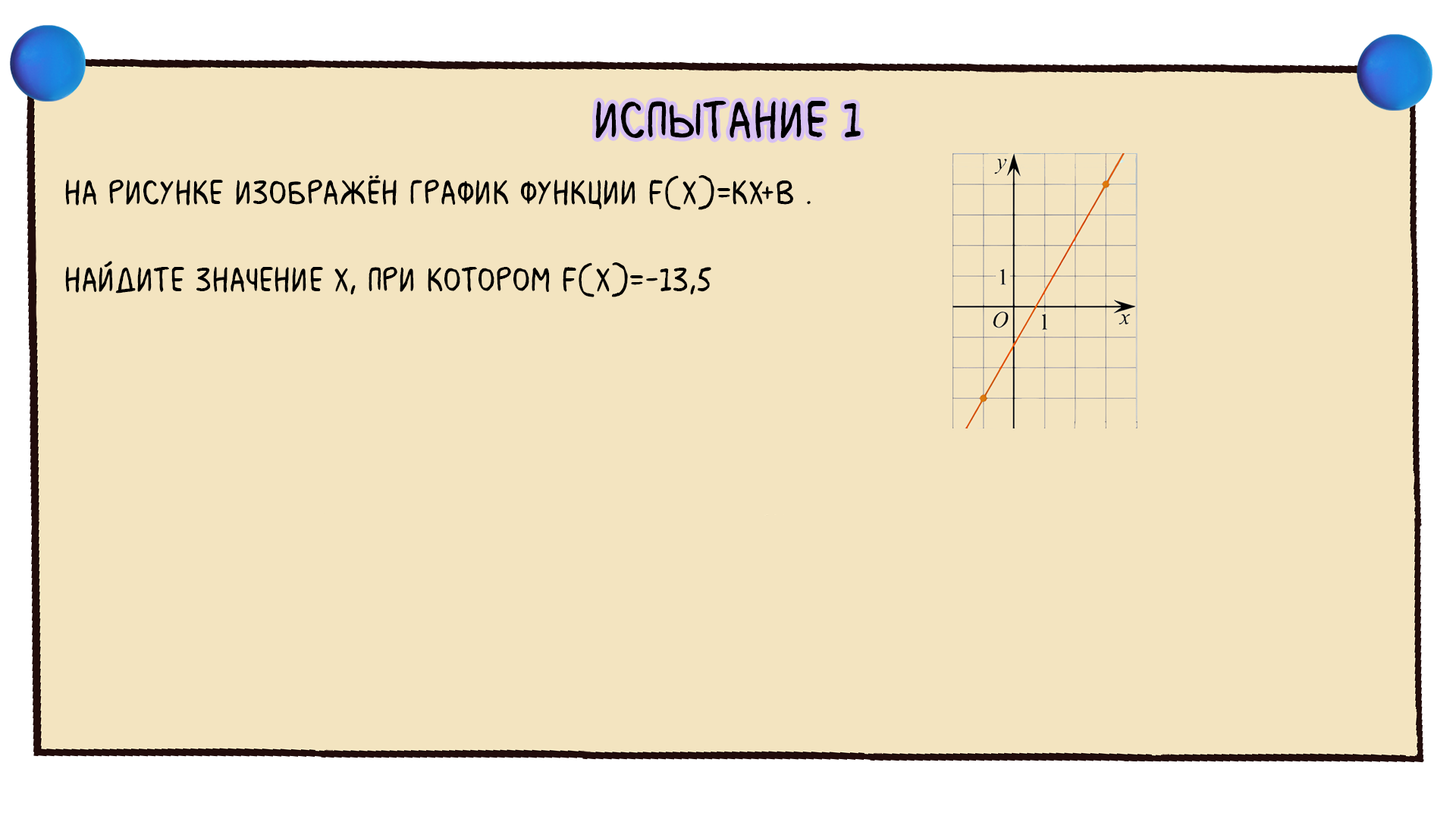
<style>
.page{position:relative;width:1456px;height:819px;background:#f3e4c0}
.page>*{position:absolute;margin:0}
.t1{font:54.6px "MilkMustacheBB";color:#000000}
.t2{font:36.4px "MilkMustacheBB";color:#000000}
</style>
<div class="page">
<p class="t1" style="left:595px;top:100px;width:266px;height:40px">испытание 1</p>
<p class="t2" style="left:65px;top:175px;width:746px;height:122px">На рисунке изображён график функции f(x)=kx+b .<br><br>Найдите значение x, при котором f(x)=-13,5</p>
</div>
